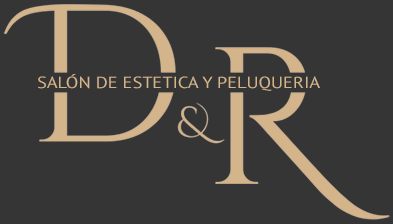
<style>
.page{position:relative;width:393px;height:224px;background:#353535}
.page>*{position:absolute;margin:0}
.t1{font:16px "PTSans-Regular";color:#d4b48b;scale:1.15 1}
</style>
<div class="page">
<p class="t1" style="left:38px;top:74px;width:282px;height:17px">SALÓN DE ESTETICA Y PELUQUERIA</p>
</div>
